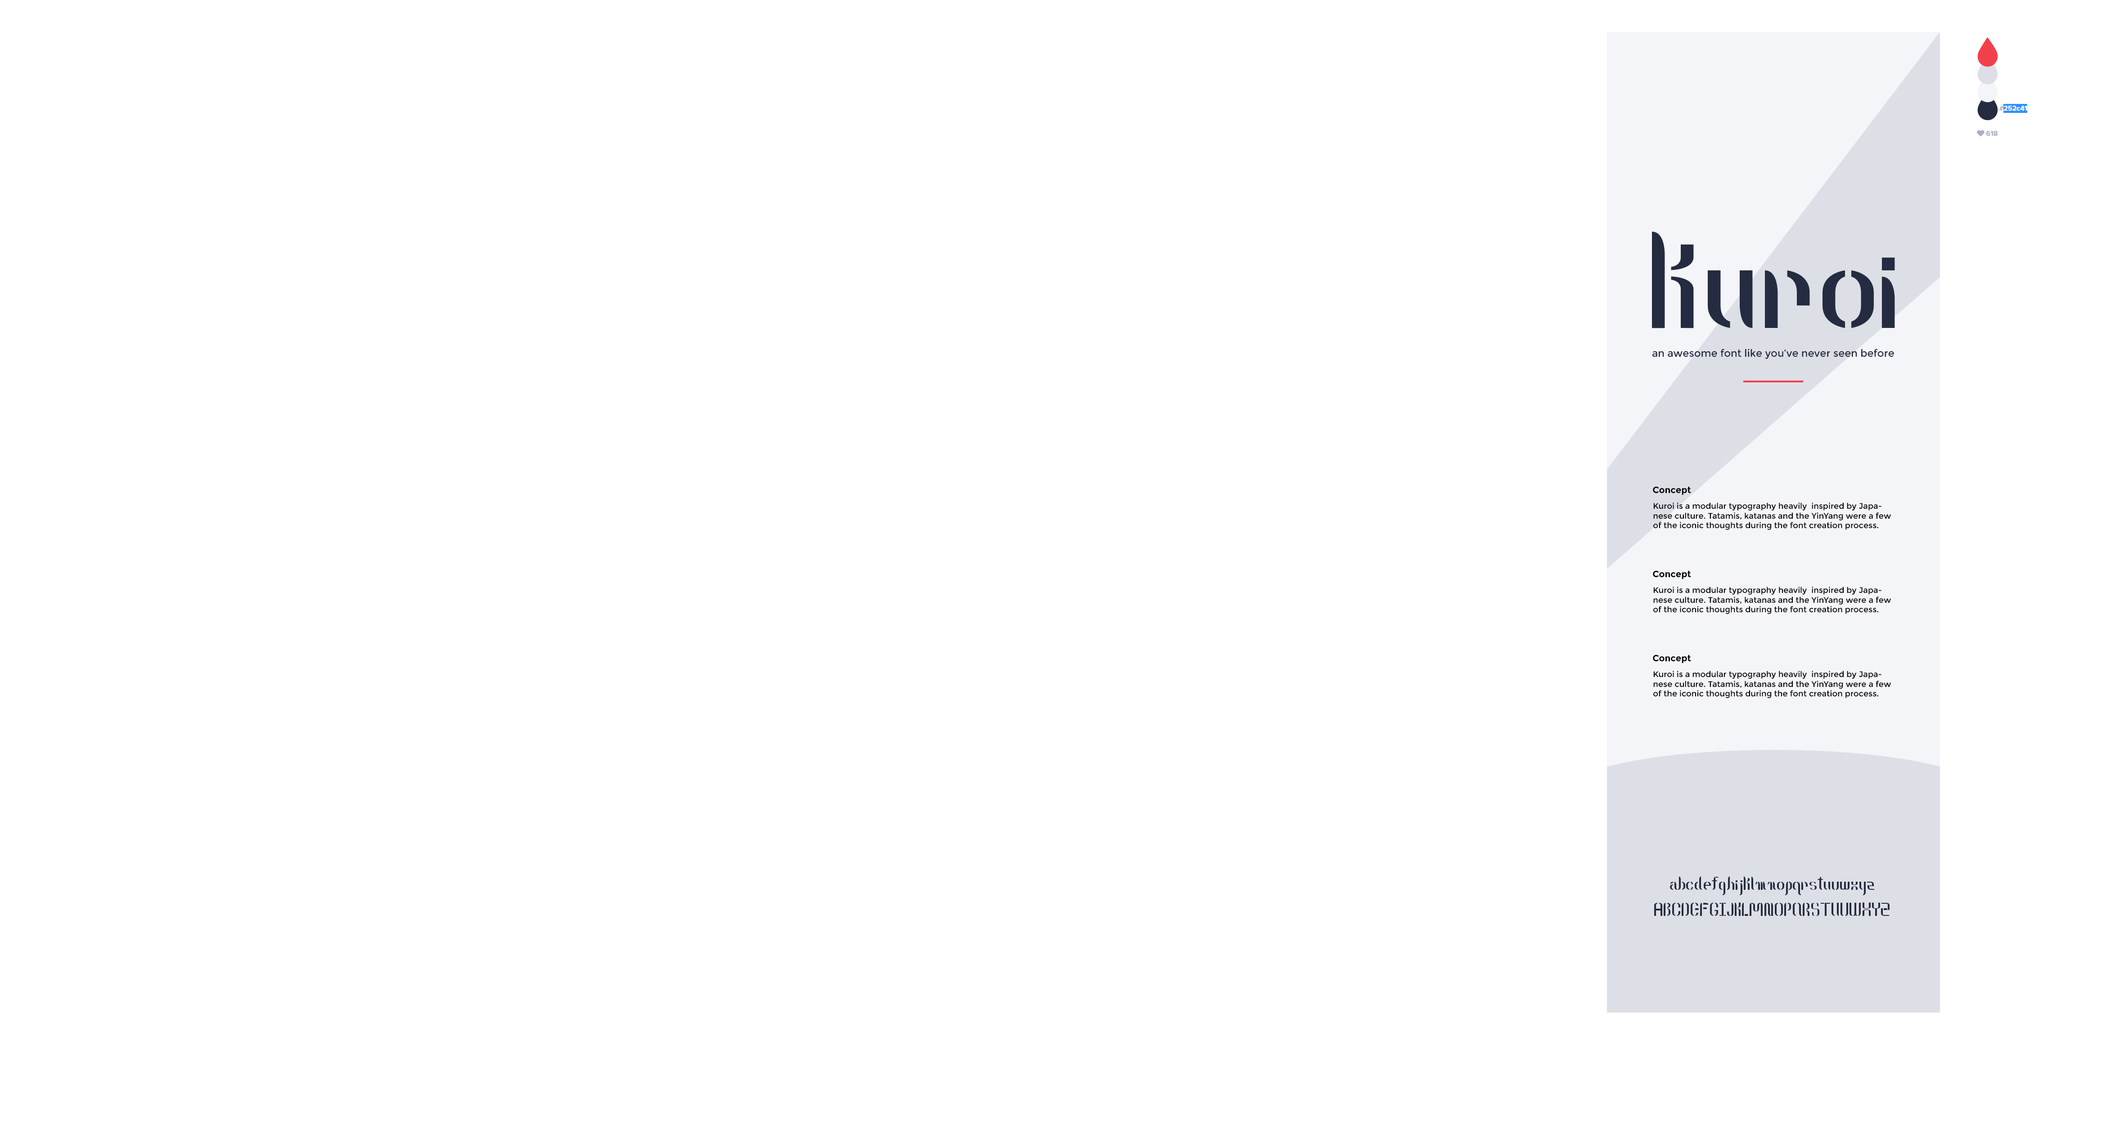
<style>
.page{position:relative;width:2124px;height:1130px;background:#ffffff}
.page>*{position:absolute;margin:0}
.t1{font:158.3px "Kuroi";color:#252c41}
.t2{font:10.2px "Montserrat-Regular";color:#252c41}
.t3{font:9px "Montserrat-Bold";color:#000000}
.t4{font:8.1px "Montserrat-Regular";color:#000000}
.t5{font:21.6px "Kuroi";color:#252c41}
</style>
<div class="page">
<p class="t1" style="left:1652px;top:231px;width:243px;height:97px">kuroi</p>
<p class="t2" style="left:1652px;top:349px;width:242px;height:10px">an awesome font like you’ve never seen before</p>
<p class="t3" style="left:1653px;top:486px;width:38px;height:9px">Concept</p>
<p class="t4" style="left:1653px;top:503px;width:238px;height:27px">Kuroi is a modular typography heavily  inspired by Japanese culture. Tatamis, katanas and the YinYang were a few of the iconic thoughts during the font creation process.</p>
<p class="t3" style="left:1653px;top:571px;width:38px;height:8px">Concept</p>
<p class="t4" style="left:1653px;top:587px;width:238px;height:27px">Kuroi is a modular typography heavily  inspired by Japanese culture. Tatamis, katanas and the YinYang were a few of the iconic thoughts during the font creation process.</p>
<p class="t3" style="left:1653px;top:655px;width:38px;height:8px">Concept</p>
<p class="t4" style="left:1653px;top:671px;width:238px;height:27px">Kuroi is a modular typography heavily  inspired by Japanese culture. Tatamis, katanas and the YinYang were a few of the iconic thoughts during the font creation process.</p>
<p class="t5" style="left:1654px;top:877px;width:236px;height:39px;text-align:center">abcdefghijklmnopqrstuvwxyz<br>ABCDEFGIJKLMNOPQRSTUVWXYZ</p>
</div>
